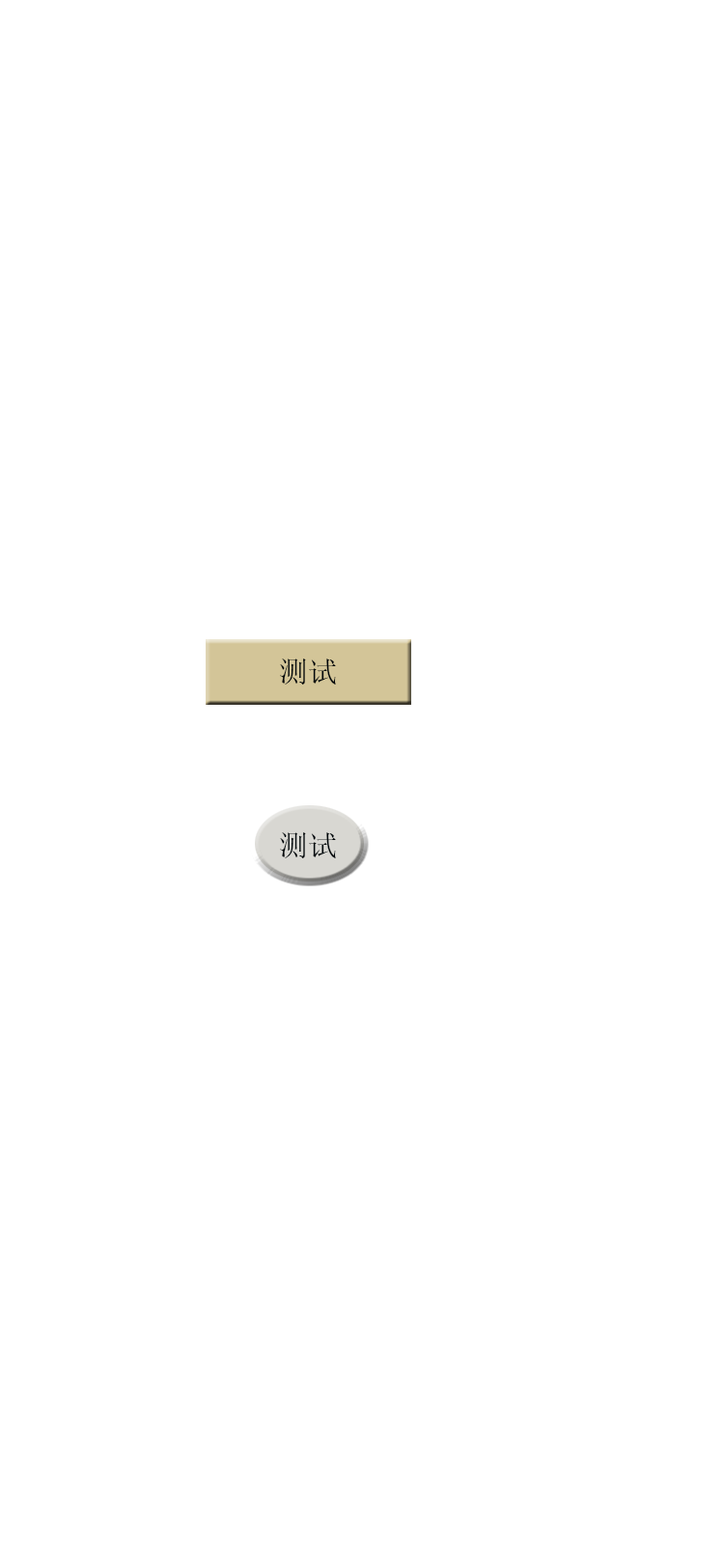
<style>
.page{position:relative;width:724px;height:1568px;background:#ffffff}
.page>*{position:absolute;margin:0}
.t1{font:29px "SimSun";letter-spacing:0.007em;color:#00060a}
</style>
<div class="page">
<p class="t1" style="left:280px;top:658px;width:56px;height:27px">测试</p>
<p class="t1" style="left:280px;top:832px;width:56px;height:26px">测试</p>
</div>
